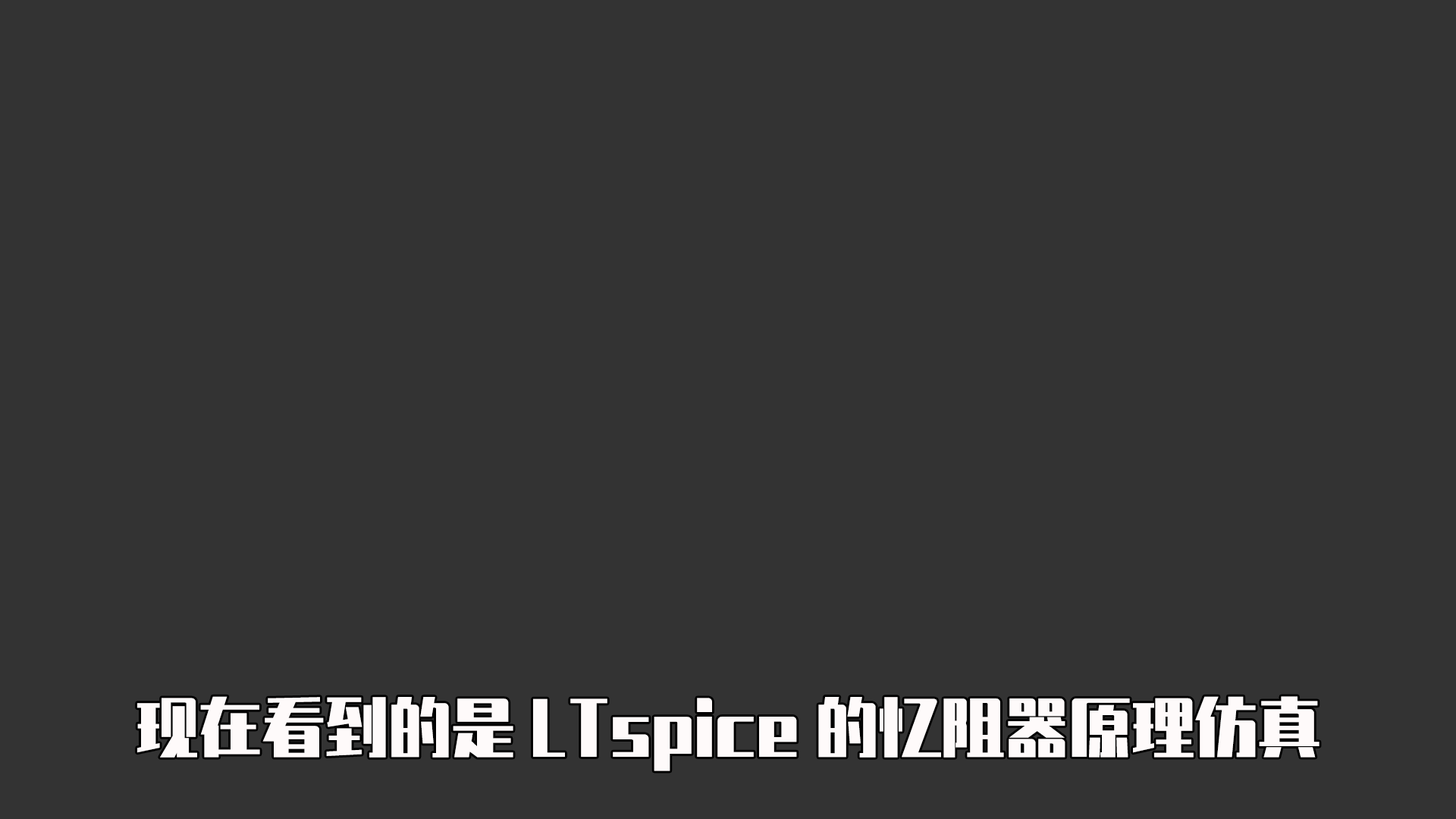
<style>
.page{position:relative;width:1456px;height:819px;background:#333333}
.page>*{position:absolute;margin:0}
.t1{font:63.2px "ZhenyanGB-Regular";color:#fefafa}
</style>
<div class="page">
<p class="t1" style="left:137px;top:696px;width:1182px;height:75px">现在看到的是LTspice的忆阻器原理仿真</p>
</div>
